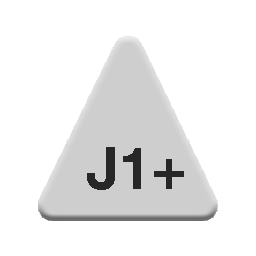
<style>
.page{position:relative;width:256px;height:256px;background:#ffffff}
.page>*{position:absolute;margin:0}
.t1{font:58.6px "HelveticaNeue-Bold";color:#282728}
</style>
<div class="page">
<p class="t1" style="left:87px;top:147px;width:97px;height:43px">J1+</p>
</div>
